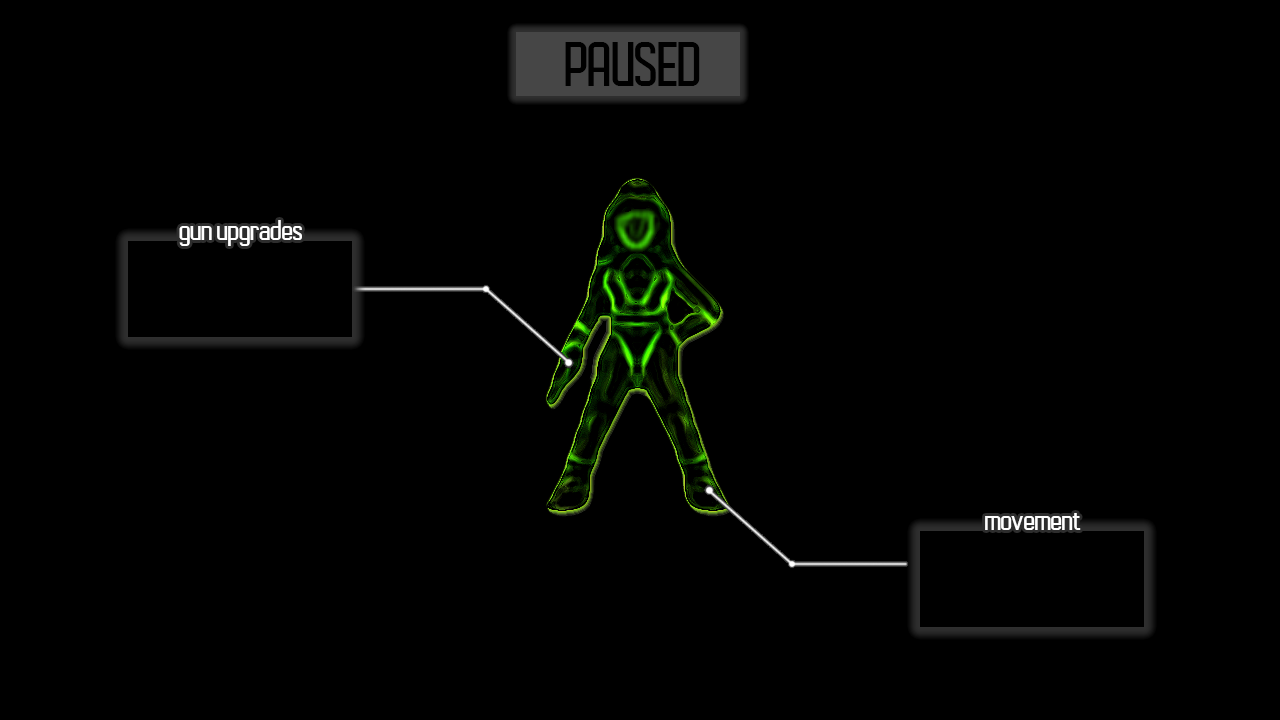
<style>
.page{position:relative;width:1280px;height:720px;background:#000000}
.page>*{position:absolute;margin:0}
.t1{font:57px "AutobusBold";letter-spacing:-0.04em;color:#000000;scale:1.05 1}
.t2{font:26.8px "AutobusBold";letter-spacing:-0.04em;color:#ffffff;scale:1.07 1}
</style>
<div class="page">
<p class="t1" style="left:565px;top:42px;width:135px;height:44px">PAUSED</p>
<p class="t2" style="left:179px;top:220px;width:123px;height:26px">gun upgrades</p>
<p class="t2" style="left:985px;top:513px;width:96px;height:17px">movement</p>
</div>
